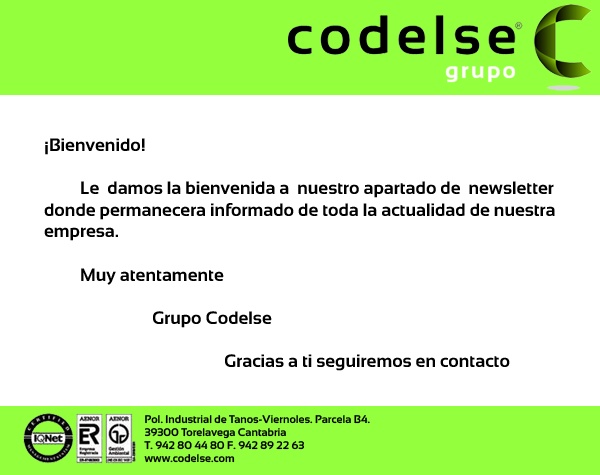
<style>
.page{position:relative;width:600px;height:475px;background:#ffffff}
.page>*{position:absolute;margin:0}
.t1{font:18px "Sansation-Bold";color:#000000}
.t2{font:11px "Sansation-Bold";color:#000000}
</style>
<div class="page">
<p class="t1" style="left:44px;top:138px;width:511px;height:233px">¡Bienvenido!<br><br> Le  damos la bienvenida a  nuestro apartado de  newsletter <br>donde permanecera informado de toda la actualidad de nuestra <br>empresa.<br><br> Muy atentamente<br>  <br>   Grupo Codelse<br><br>     Gracias a ti seguiremos en contacto</p>
<p class="t2" style="left:144px;top:415px;width:226px;height:48px">Pol. Industrial de Tanos-Viernoles. Parcela B4.<br>39300 Torelavega Cantabria<br>T. 942 80 44 80 F. 942 89 22 63<br>www.codelse.com</p>
</div>
